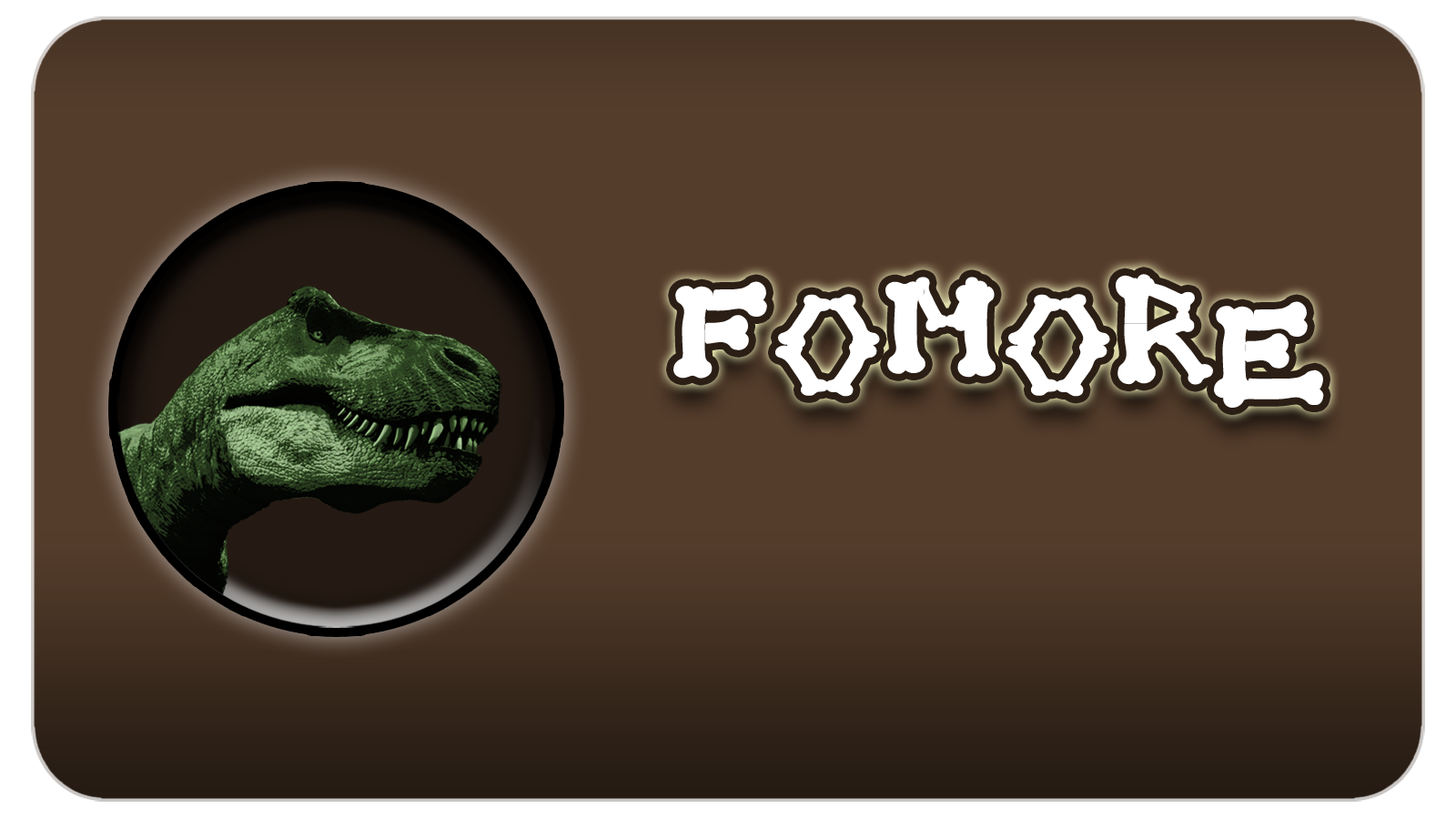
<style>
.page{position:relative;width:1456px;height:819px;background:#553d2b}
.page>*{position:absolute;margin:0}
.t1{font:110.2px "4DOGS";color:#ffffff;font-weight:bold;scale:1.09 1}
</style>
<div class="page">
<p class="t1" style="left:673px;top:274px;width:651px;height:134px">fomore</p>
</div>
